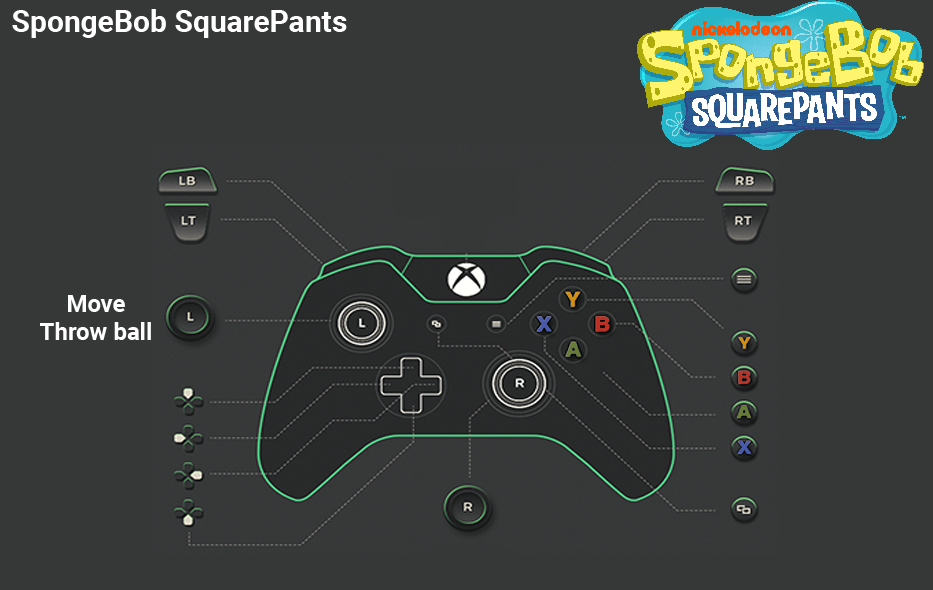
<style>
.page{position:relative;width:933px;height:590px;background:#363838}
.page>*{position:absolute;margin:0}
.t1{font:30px "Roboto-Bold";color:#ffffff}
.t2{font:24px/28px "Roboto-Bold";color:#ffffff}
</style>
<div class="page">
<p class="t1" style="left:12px;top:9px;width:335px;height:29px">SpongeBob SquarePants</p>
<p class="t2" style="left:40px;top:295px;width:111px;height:45px;text-align:center">Move<br>Throw ball</p>
</div>
